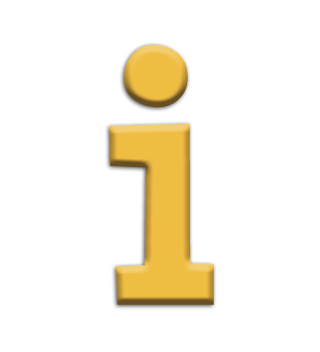
<style>
.page{position:relative;width:320px;height:352px;background:#ffffff}
.page>*{position:absolute;margin:0}
.t1{font:422px "FinkHeavy";color:#efbd42}
</style>
<div class="page">
<p class="t1" style="left:109px;top:45px;width:105px;height:260px">i</p>
</div>
